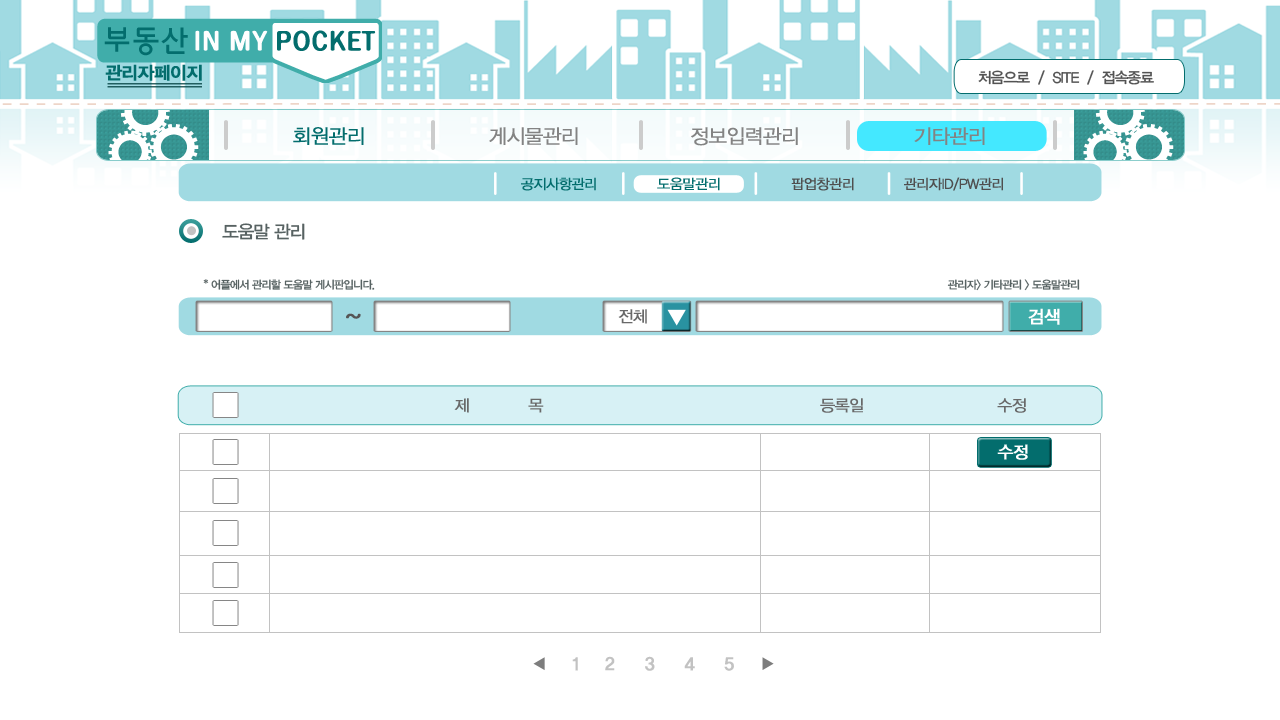
<style>
.page{position:relative;width:1280px;height:720px;background:#ffffff}
.page>*{position:absolute;margin:0}
.t1{font:17.8px "YDIYGO340";letter-spacing:-0.04em;color:#036d6d;font-weight:bold}
.t2{font:15px "YDIYGO330";letter-spacing:-0.06em;color:#535353}
.t3{font:20px "YDIYGO320";letter-spacing:-0.04em;color:#036d6d;font-weight:bold}
.t4{font:20px "YDIYGO320";letter-spacing:-0.04em;color:#838383;font-weight:bold}
.t5{font:14px "YDIYGO320";letter-spacing:-0.04em;color:#036d6d;font-weight:bold}
.t6{font:14px "YDIYGO320";letter-spacing:-0.04em;color:#4f4f4f;font-weight:bold}
.t7{font:18px "YDIYGO330";letter-spacing:-0.06em;color:#576262}
.t8{font:11px "YDIYGO330";letter-spacing:-0.06em;color:#576262}
.t9{font:23.8px "FBsky-Medium--KSCpc-EUC-H";letter-spacing:-0.04em;color:#555555;font-weight:bold}
.t10{font:16px "YDIYGO320";letter-spacing:-0.04em;color:#696969;font-weight:bold}
.t11{font:17.8px "YDIYGO330";letter-spacing:-0.04em;color:#ffffff;font-weight:bold}
.t12{font:16.8px "YDIYGO330";letter-spacing:-0.04em;color:#ffffff;font-weight:bold}
.t13{font:17.8px "YDIYGO340";letter-spacing:-0.04em;color:#c2c2c2;font-weight:bold}
</style>
<div class="page">
<p class="t1" style="left:105px;top:64px;width:97px;height:17px">관리자페이지</p>
<p class="t2" style="left:978px;top:70px;width:176px;height:15px">처음으로  /  SITE  /  접속종료</p>
<p class="t3" style="left:293px;top:127px;width:71px;height:18px">회원관리</p>
<p class="t4" style="left:489px;top:127px;width:89px;height:18px">게시물관리</p>
<p class="t4" style="left:691px;top:127px;width:107px;height:19px">정보입력관리</p>
<p class="t4" style="left:914px;top:127px;width:71px;height:18px">기타관리</p>
<p class="t5" style="left:521px;top:177px;width:75px;height:14px">공지사항관리</p>
<p class="t5" style="left:657px;top:177px;width:63px;height:14px">도움말관리</p>
<p class="t6" style="left:791px;top:177px;width:63px;height:14px">팝업창관리</p>
<p class="t6" style="left:904px;top:177px;width:99px;height:14px">관리자ID/PW관리</p>
<p class="t7" style="left:222px;top:223px;width:83px;height:17px">도움말 관리</p>
<p class="t8" style="left:203px;top:279px;width:172px;height:11px">* 어플에서 관리할 도움말 게시판입니다.</p>
<p class="t8" style="left:947px;top:279px;width:133px;height:12px">관리자&gt; 기타관리 &gt; 도움말관리</p>
<p class="t9" style="left:346px;top:313px;width:15px;height:6px">~</p>
<p class="t10" style="left:618px;top:309px;width:29px;height:15px">전체</p>
<p class="t11" style="left:1028px;top:308px;width:32px;height:17px">검색</p>
<p class="t10" style="left:454px;top:398px;width:90px;height:15px">제           목</p>
<p class="t10" style="left:820px;top:398px;width:43px;height:15px">등록일</p>
<p class="t10" style="left:997px;top:398px;width:29px;height:15px">수정</p>
<p class="t12" style="left:997px;top:444px;width:31px;height:16px">수정</p>
<p class="t13" style="left:572px;top:656px;width:162px;height:15px">1    2     3     4     5</p>
</div>
